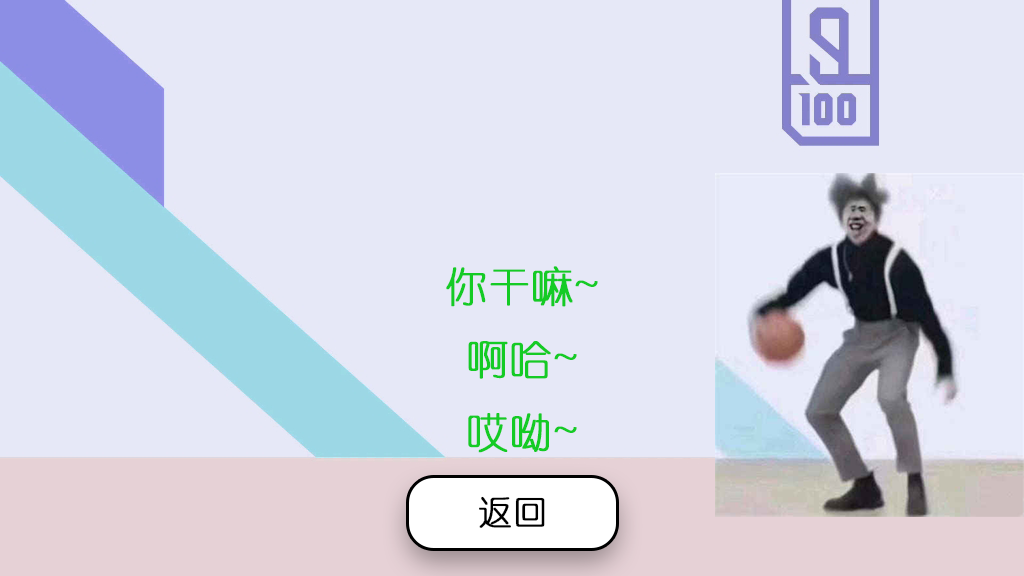
<style>
.page{position:relative;width:1024px;height:576px;background:#e6e8f7}
.page>*{position:absolute;margin:0}
.t1{font:41.7px "YouYuan";color:#14cb25;font-weight:bold}
.t2{font:41.7px "CaviarDreams";color:#14cb25;font-weight:bold}
.t3{font:33.3px "YouYuan";color:#000000;font-weight:bold}
</style>
<div class="page">
<p class="t1" style="left:446px;top:266px;width:152px;height:187px;text-align:center">你干嘛<span class="t2">~<br></span>啊哈<span class="t2">~<br></span>哎呦<span class="t2">~</span></p>
<p class="t3" style="left:479px;top:496px;width:66px;height:32px">返回</p>
</div>
